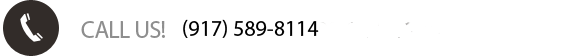
<style>
.page{position:relative;width:570px;height:56px;background:#ffffff}
.page>*{position:absolute;margin:0}
.t1{font:22px "MyriadPro-Regular";color:#000000}
</style>
<div class="page">
<p class="t1" style="left:183px;top:19px;width:136px;height:19px">(917) 589-8114</p>
</div>
